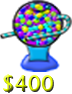
<style>
.page{position:relative;width:72px;height:94px;background:#ffffff}
.page>*{position:absolute;margin:0}
.t1{font:22px "LucidaConsole"}
</style>
<div class="page">
<p class="t1" style="left:3px;top:74px;width:50px;height:18px">$400</p>
</div>
